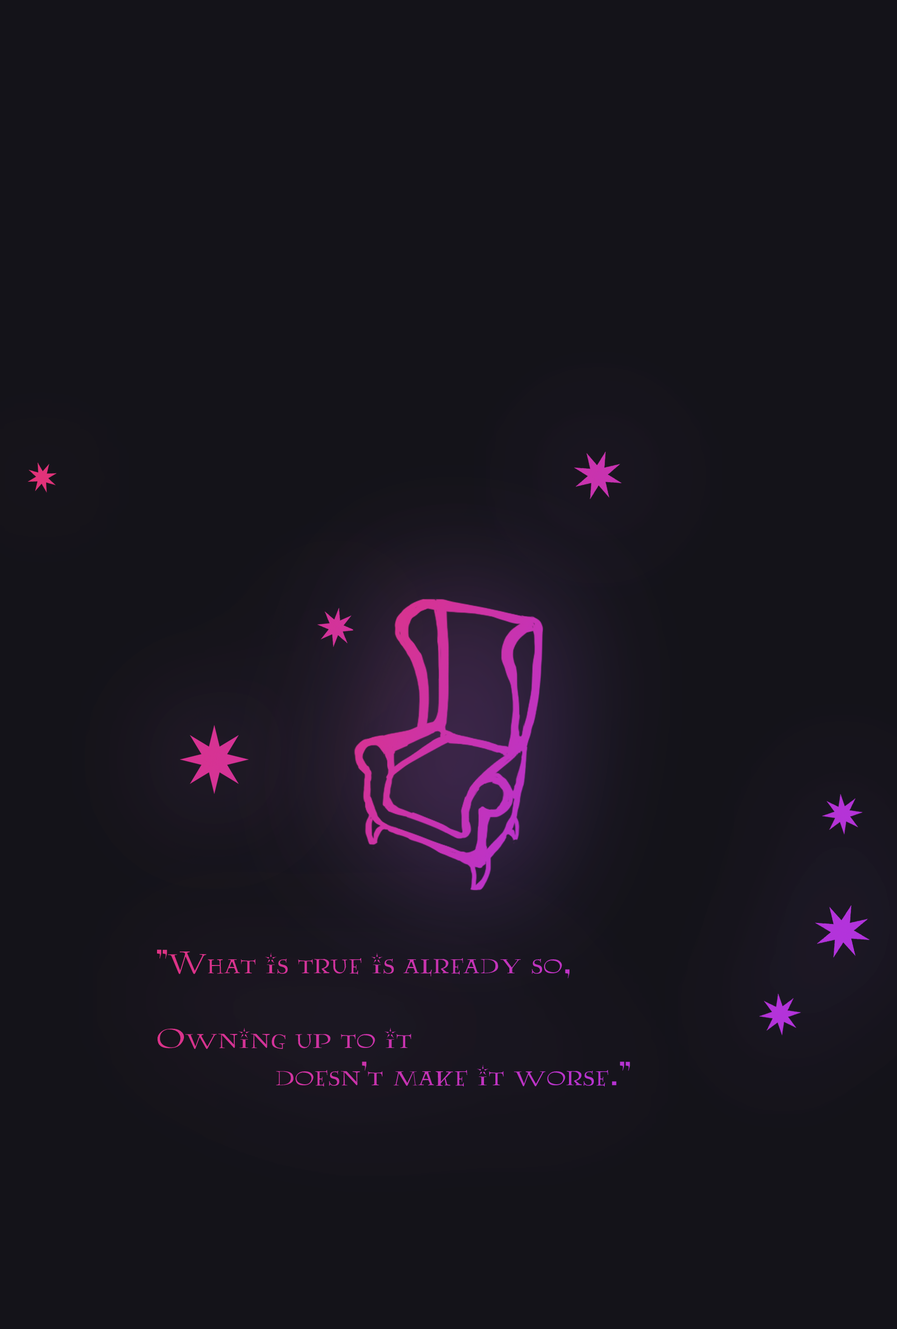
<style>
.page{position:relative;width:897px;height:1329px;background:#141319}
.page>*{position:absolute;margin:0}
.t1{font:31.1px "Lumos"}
</style>
<div class="page">
<p class="t1" style="left:156px;top:949px;width:474px;height:138px">"What is true is already so,<br>        <br>Owning up to it<br>             doesn't make it worse."</p>
</div>
